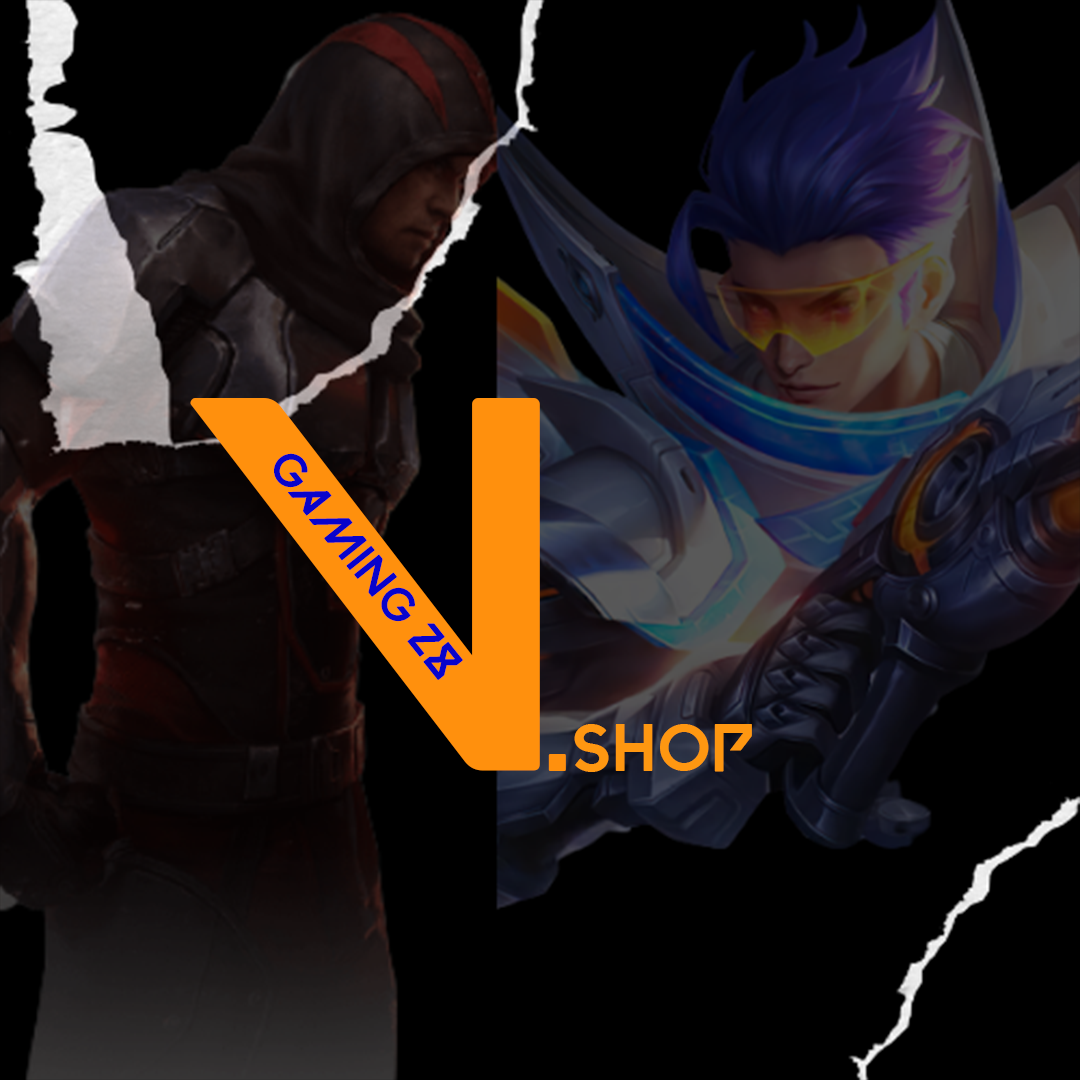
<style>
.page{position:relative;width:1080px;height:1080px;background:#000000}
.page>*{position:absolute;margin:0}
.t1{font:531.5px "VALORANT-Regular";color:#ff900d}
.t2{font:45.8px "VALORANT-Regular";color:#0803cc}
.t3{font:66.7px "VALORANT-Regular";color:#fe9711}
.t4{font:125px "VALORANT-Regular";color:#ff900d}
</style>
<div class="page">
<p class="t1" style="left:190px;top:398px;width:350px;height:373px">V</p>
<p class="t2" style="left:274px;top:453px;width:189px;height:227px;rotate:51deg">GAMING 28</p>
<p class="t3" style="left:574px;top:724px;width:178px;height:48px">SHOP</p>
<p class="t4" style="left:548px;top:754px;width:18px;height:17px">.</p>
</div>
